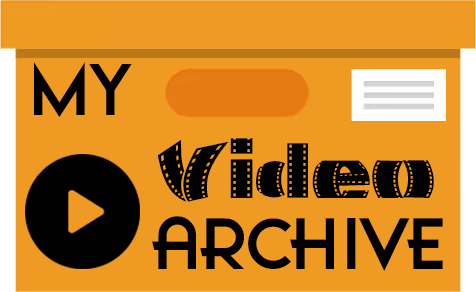
<style>
.page{position:relative;width:476px;height:292px;background:#ef9a23}
.page>*{position:absolute;margin:0}
.t1{font:67.6px "FilmNoirAdventure";color:#000000}
.t2{font:79.7px "MovieFilmstrip";color:#000000}
</style>
<div class="page">
<p class="t1" style="left:34px;top:62px;width:98px;height:55px">My</p>
<p class="t2" style="left:158px;top:138px;width:276px;height:64px">Video</p>
<p class="t1" style="left:152px;top:216px;width:291px;height:55px">Archive</p>
</div>
